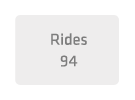
<style>
.page{position:relative;width:135px;height:100px;background:#eeeded}
.page>*{position:absolute;margin:0}
.t1{font:16.2px "KlavikaRegular-OSF";color:#7d7d7d}
</style>
<div class="page">
<p class="t1" style="left:51px;top:33px;width:36px;height:34px;text-align:center">Rides<br>94</p>
</div>
